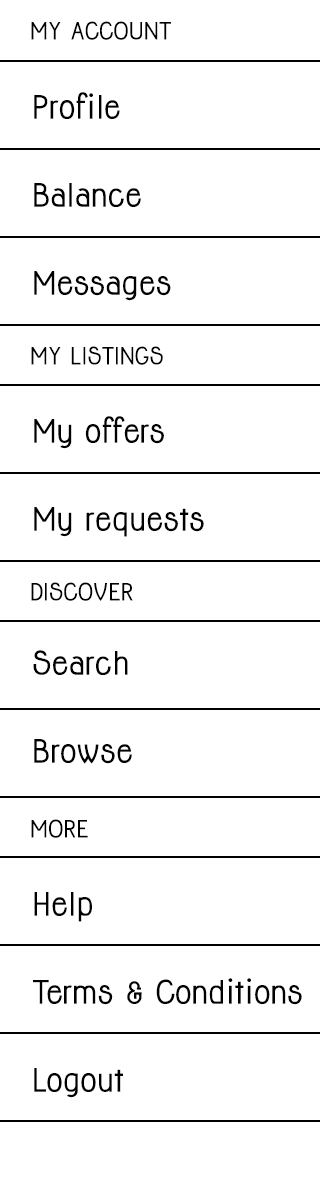
<style>
.page{position:relative;width:320px;height:1200px;background:#ffffff}
.page>*{position:absolute;margin:0}
.t1{font:22px "Jolly-Bold";color:#000000}
.t2{font:29.8px "Jolly-Bold";color:#000000}
</style>
<div class="page">
<p class="t1" style="left:31px;top:21px;width:140px;height:19px">MY ACCOUNT</p>
<p class="t2" style="left:34px;top:92px;width:86px;height:27px">Profile</p>
<p class="t2" style="left:34px;top:183px;width:107px;height:24px">Balance</p>
<p class="t2" style="left:34px;top:271px;width:137px;height:30px">Messages</p>
<p class="t1" style="left:31px;top:346px;width:132px;height:19px">MY LISTINGS</p>
<p class="t2" style="left:34px;top:416px;width:130px;height:33px">My offers</p>
<p class="t2" style="left:34px;top:507px;width:170px;height:30px">My requests</p>
<p class="t1" style="left:31px;top:582px;width:102px;height:19px">DISCOVER</p>
<p class="t2" style="left:33px;top:650px;width:95px;height:25px">Search</p>
<p class="t2" style="left:34px;top:739px;width:98px;height:25px">Browse</p>
<p class="t1" style="left:31px;top:819px;width:57px;height:19px">MORE</p>
<p class="t2" style="left:34px;top:892px;width:58px;height:30px">Help</p>
<p class="t2" style="left:33px;top:978px;width:269px;height:27px">Terms &amp; Conditions</p>
<p class="t2" style="left:34px;top:1068px;width:89px;height:30px">Logout</p>
</div>
